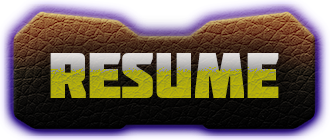
<style>
.page{position:relative;width:330px;height:140px}
.page>*{position:absolute;margin:0}
.t1{font:65px "Molot"}
</style>
<div class="page">
<p class="t1" style="left:50px;top:53px;width:229px;height:45px">RESUME</p>
</div>
